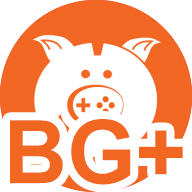
<style>
.page{position:relative;width:192px;height:192px;background:#ffffff}
.page>*{position:absolute;margin:0}
.t1{font:88px "Arial-BoldMT";color:#f16722}
</style>
<div class="page">
<p class="t1" style="left:10px;top:119px;width:173px;height:66px">BG+</p>
</div>
